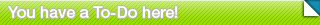
<style>
.page{position:relative;width:320px;height:25px}
.page>*{position:absolute;margin:0}
.t1{font:16px "HelveticaNeueLTPro-Md";color:#ffffff}
</style>
<div class="page">
<p class="t1" style="left:7px;top:6px;width:171px;height:12px">You have a To-Do here!</p>
</div>
